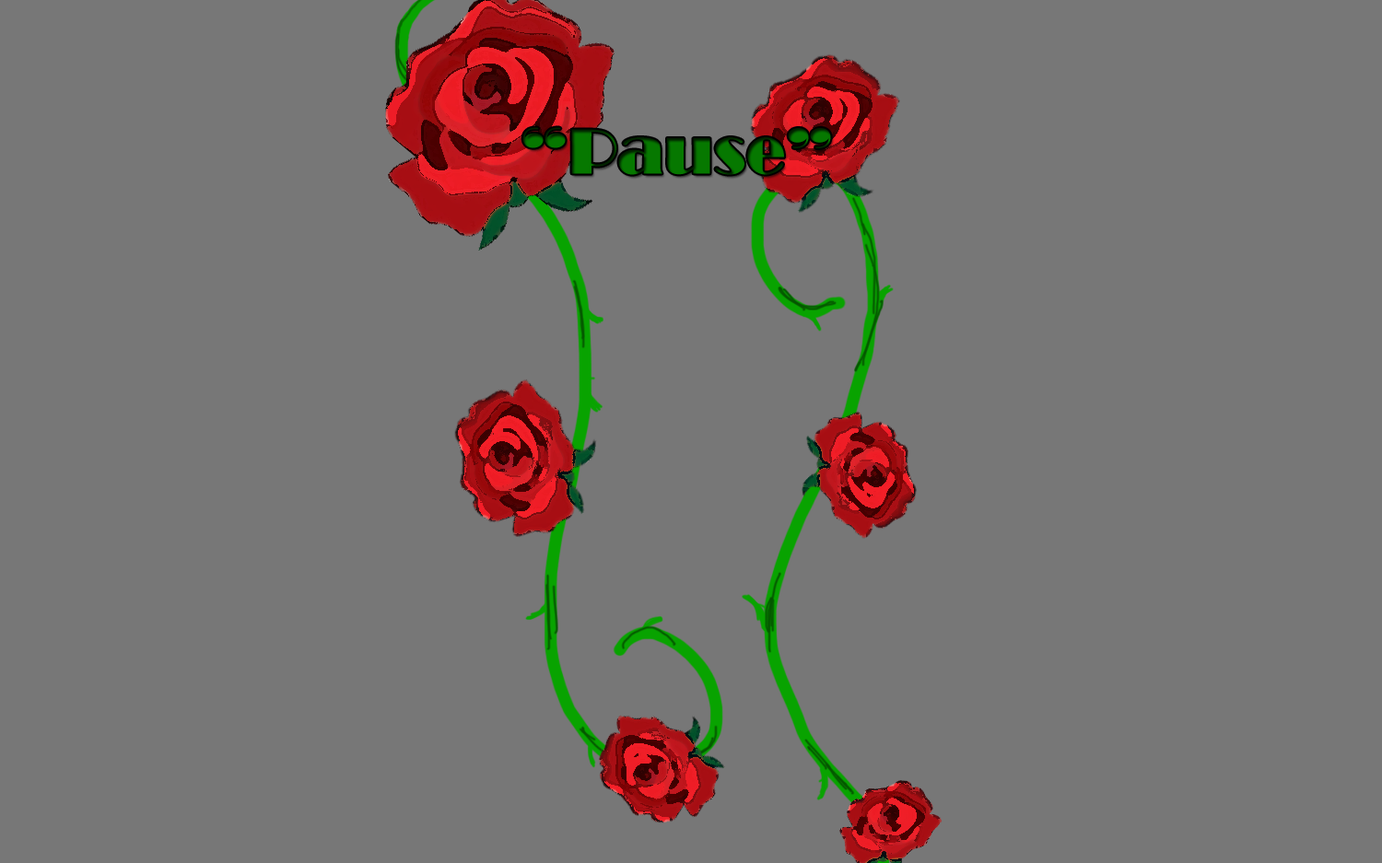
<style>
.page{position:relative;width:1382px;height:863px;background:#777777}
.page>*{position:absolute;margin:0}
.t1{font:66.3px "Broadway";color:#067800}
</style>
<div class="page">
<p class="t1" style="left:522px;top:127px;width:309px;height:48px">“Pause”</p>
</div>
